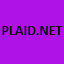
<style>
.page{position:relative;width:64px;height:64px;background:#ae12e7}
.page>*{position:absolute;margin:0}
.t1{font:14px "Calibri-Bold";color:#0a0a0a}
</style>
<div class="page">
<p class="t1" style="left:2px;top:26px;width:61px;height:9px">PLAID.NET</p>
</div>
